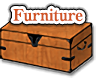
<style>
.page{position:relative;width:96px;height:78px;background:#ffffff}
.page>*{position:absolute;margin:0}
.t1{font:16px "RyuminPro-ExBold";letter-spacing:-0.04em;color:#cf5323}
</style>
<div class="page">
<p class="t1" style="left:13px;top:8px;width:70px;height:14px">Furniture</p>
</div>
